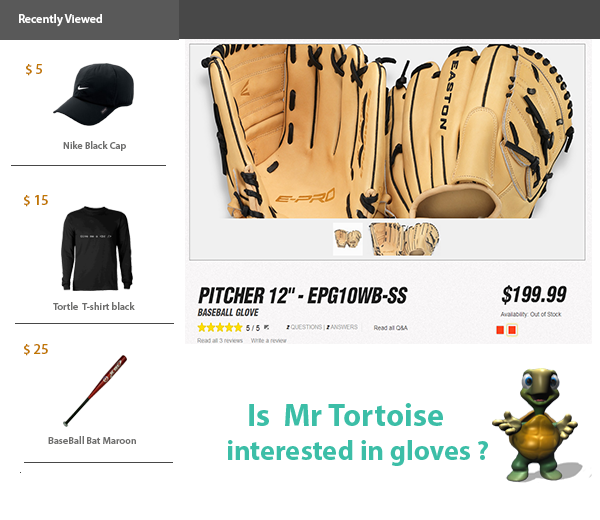
<style>
.page{position:relative;width:600px;height:520px;background:#ffffff}
.page>*{position:absolute;margin:0}
.t1{font:12px "MyriadPro-Semibold";color:#ffffff}
.t2{font:14px "MyriadPro-Semibold";color:#c17702}
.t3{font:10px "MyriadPro-Semibold";color:#6e6e6d}
.t4{font:28px "MyriadPro-Bold";color:#3cbea7}
.t5{font:32px "MyriadPro-Bold";color:#484848}
.t6{font:32px "MyriadPro-Bold";color:#3cbea7}
</style>
<div class="page">
<p class="t1" style="left:19px;top:14px;width:83px;height:13px">Recently Viewed</p>
<p class="t2" style="left:26px;top:64px;width:16px;height:12px">$ 5</p>
<p class="t3" style="left:63px;top:141px;width:63px;height:10px">Nike Black Cap</p>
<p class="t2" style="left:24px;top:195px;width:24px;height:12px">$ 15</p>
<p class="t3" style="left:53px;top:302px;width:82px;height:8px">Tortle  T-shirt black</p>
<p class="t2" style="left:24px;top:344px;width:24px;height:12px">$ 25</p>
<p class="t4" style="left:228px;top:403px;width:260px;height:63px"><span class="t5">     </span><span class="t6">Is  Mr Tortoise<br></span>  interested in gloves ?</p>
<p class="t3" style="left:48px;top:436px;width:88px;height:8px">BaseBall Bat Maroon</p>
</div>
